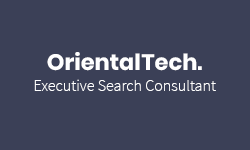
<style>
.page{position:relative;width:250px;height:150px;background:#3b4057}
.page>*{position:absolute;margin:0}
.t1{font:22.4px "Poppins-Bold";color:#ffffff}
.t2{font:16px "SourceSansPro-Light";color:#ffffff}
</style>
<div class="page">
<p class="t1" style="left:47px;top:52px;width:93px;height:19px">Oriental</p>
<p class="t1" style="left:141px;top:53px;width:61px;height:18px">Tech.</p>
<p class="t2" style="left:34px;top:79px;width:182px;height:12px">Executive Search Consultant</p>
</div>
